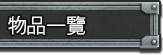
<style>
.page{position:relative;width:163px;height:55px}
.page>*{position:absolute;margin:0}
.t1{font:20px "GothicMB101Pr6N-Light";color:#fbfbf9}
</style>
<div class="page">
<p class="t1" style="left:8px;top:15px;width:78px;height:20px">物品一覽</p>
</div>
